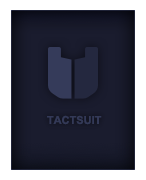
<style>
.page{position:relative;width:146px;height:180px;background:#ffffff}
.page>*{position:absolute;margin:0}
.t1{font:11px "Arial-BoldMT";color:#333957}
</style>
<div class="page">
<p class="t1" style="left:47px;top:115px;width:55px;height:10px">TACTSUIT</p>
</div>
